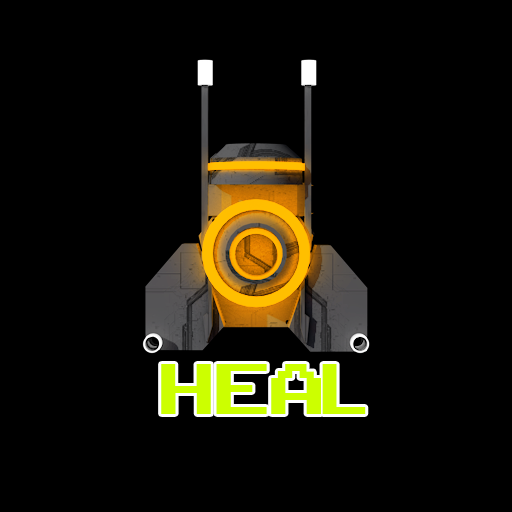
<style>
.page{position:relative;width:512px;height:512px;background:#000000}
.page>*{position:absolute;margin:0}
.t1{font:100px "ArcadeClassic";color:#ccff00}
</style>
<div class="page">
<p class="t1" style="left:161px;top:364px;width:205px;height:50px">Heal</p>
</div>
